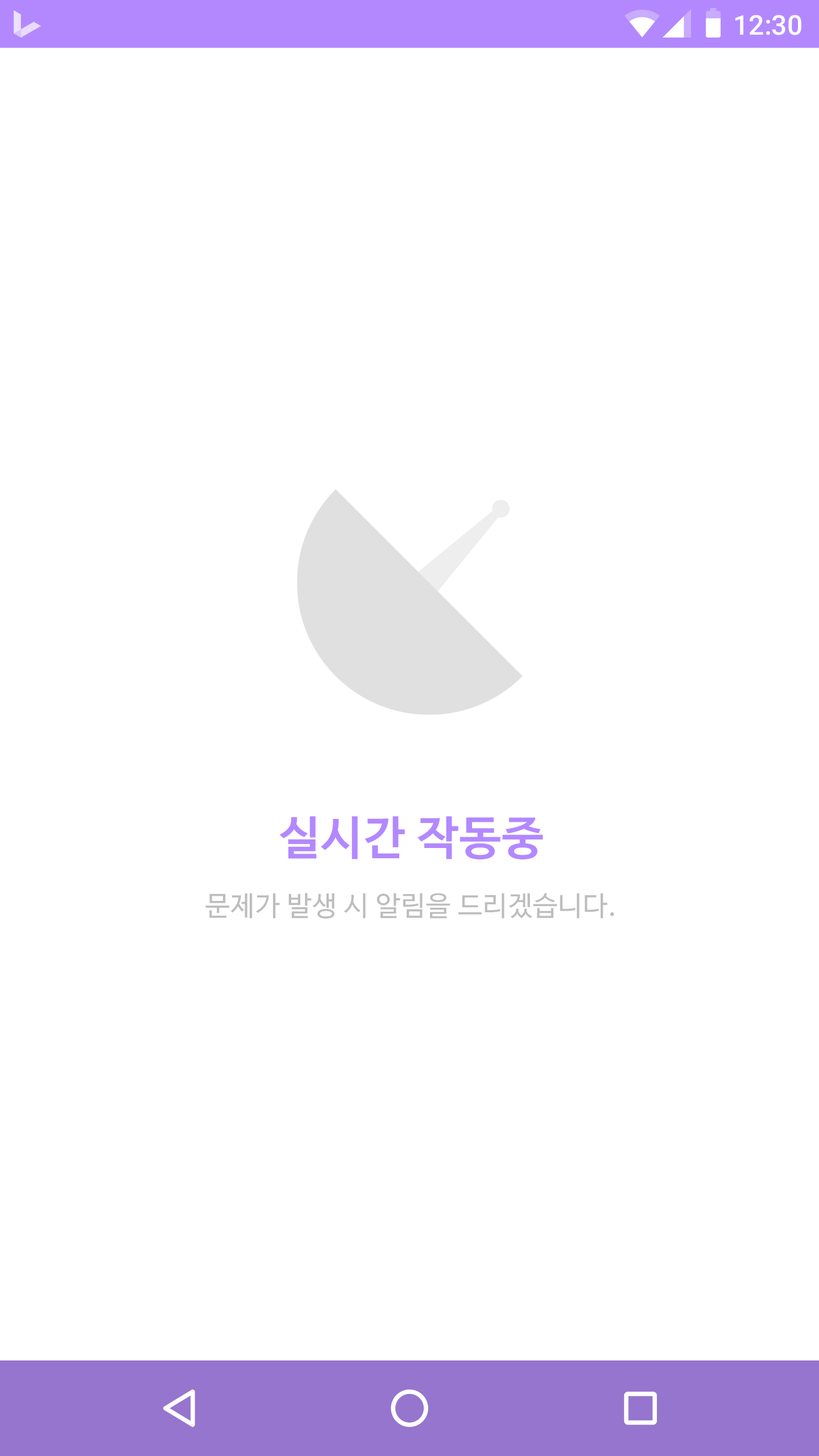
<style>
.page{position:relative;width:819px;height:1456px;background:#ffffff}
.page>*{position:absolute;margin:0}
.t1{font:27.3px "Roboto-Medium";color:#ffffff}
.t2{font:46.1px "NanumBarunGothicBold";letter-spacing:0.025em;color:#b388ff}
.t3{font:27.3px "NanumBarunGothic";letter-spacing:0.025em;color:#bdbdbd}
</style>
<div class="page">
<p class="t1" style="left:735px;top:15px;width:66px;height:20px">12:30</p>
<p class="t2" style="left:279px;top:816px;width:264px;height:43px">실시간 작동중</p>
<p class="t3" style="left:205px;top:893px;width:409px;height:26px">문제가 발생 시 알림을 드리겠습니다.</p>
</div>
